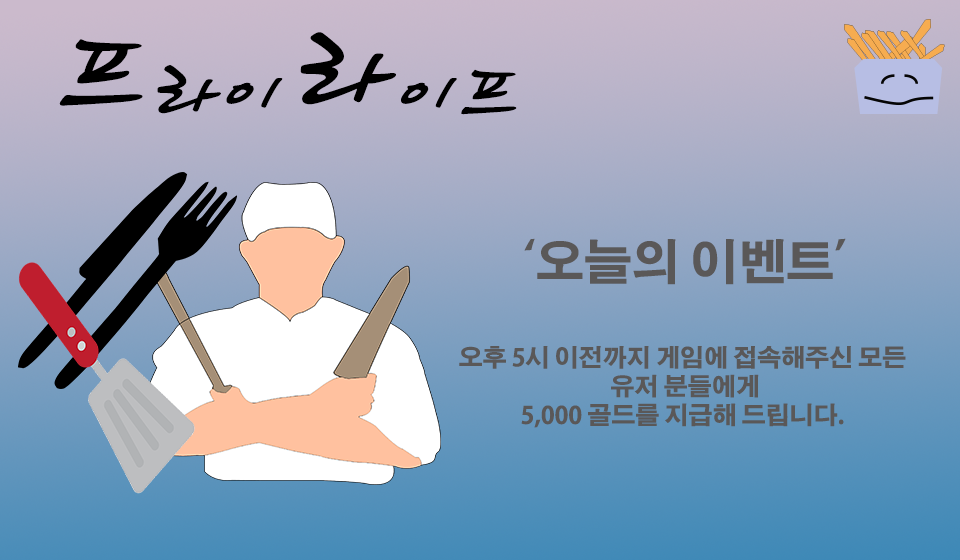
<style>
.page{position:relative;width:960px;height:560px}
.page>*{position:absolute;margin:0}
.t1{font:100px "HaanCjaB";color:#000000}
.t2{font:150px "HaanCjaB";color:#000000}
.t3{font:24px "AdobeGothicStd-Bold";color:#5a5858}
.t4{font:48px "AdobeGothicStd-Bold";color:#5a5858}
</style>
<div class="page">
<p class="t1" style="left:59px;top:32px;width:458px;height:83px"><span class="t2">프</span>라이  <span class="t2">라</span>이프</p>
<p class="t3" style="left:459px;top:238px;width:447px;height:190px;text-align:center"><span class="t4">‘오늘의 이벤트’<br></span><br><br>오후 5시 이전까지 게임에 접속해주신 모든 <br>유저 분들에게<br>5,000 골드를 지급해 드립니다.</p>
</div>
